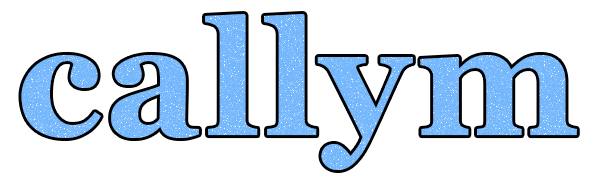
<style>
.page{position:relative;width:600px;height:180px;background:#ffffff}
.page>*{position:absolute;margin:0}
.t1{font:160px "Georgia-Bold";letter-spacing:0.025em;color:#73b6fb}
</style>
<div class="page">
<p class="t1" style="left:21px;top:14px;width:556px;height:156px">callym</p>
</div>
